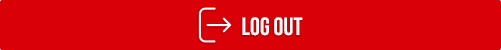
<style>
.page{position:relative;width:501px;height:50px;background:#da0008}
.page>*{position:absolute;margin:0}
.t1{font:25px "UTM-Bebas";color:#ffffff}
</style>
<div class="page">
<p class="t1" style="left:242px;top:17px;width:61px;height:19px">log out</p>
</div>
